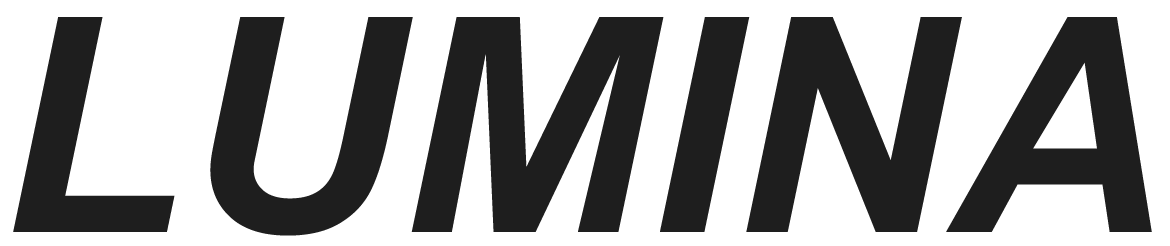
<style>
.page{position:relative;width:1170px;height:246px;background:#ffffff}
.page>*{position:absolute;margin:0}
.t1{font:300px "Arial-BoldItalicMT";color:#1e1e1e}
</style>
<div class="page">
<p class="t1" style="left:13px;top:17px;width:1139px;height:219px">LUMINA</p>
</div>
